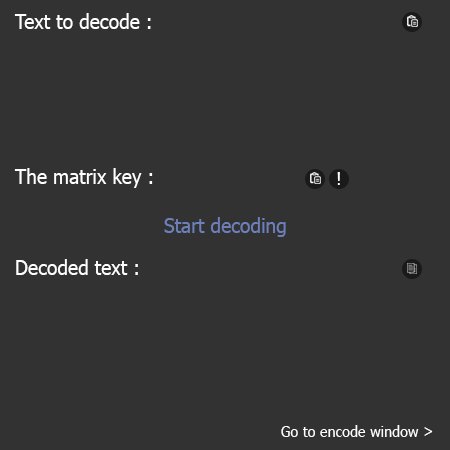
<style>
.page{position:relative;width:450px;height:450px;background:#323232}
.page>*{position:absolute;margin:0}
.t1{font:20px "Tahoma";color:#ffffff;scale:0.96 1}
.t2{font:18px "Tahoma";color:#ffffff;scale:0.96 1}
.t3{font:20px "Tahoma";color:#6e80b9;scale:0.96 1}
.t4{font:15px "Tahoma";color:#ffffff;scale:0.96 1}
</style>
<div class="page">
<p class="t1" style="left:14px;top:13px;width:137px;height:16px">Text to decode :</p>
<p class="t1" style="left:14px;top:168px;width:139px;height:20px">The matrix key :</p>
<p class="t2" style="left:337px;top:172px;width:3px;height:13px">!</p>
<p class="t3" style="left:164px;top:217px;width:122px;height:20px">Start decoding</p>
<p class="t1" style="left:16px;top:259px;width:122px;height:16px">Decoded text :</p>
<p class="t4" style="left:281px;top:425px;width:152px;height:12px">Go to encode window &gt;</p>
</div>
